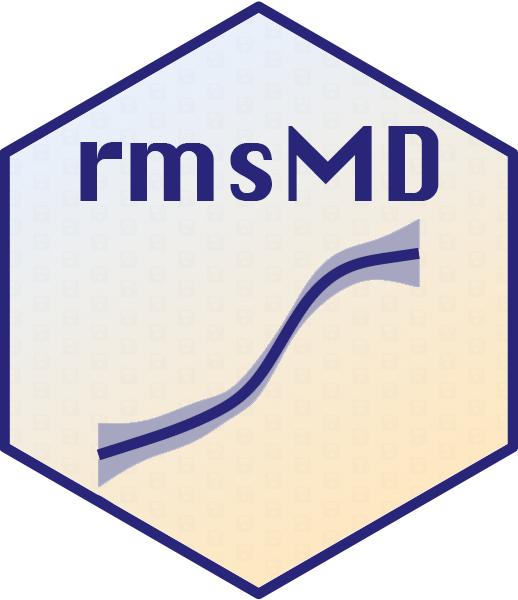
<style>
.page{position:relative;width:518px;height:600px;background:#ffffff}
.page>*{position:absolute;margin:0}
.t1{font:100px "Krungthep";color:#29267a}
</style>
<div class="page">
<p class="t1" style="left:80px;top:126px;width:359px;height:75px">rmsMD</p>
</div>
